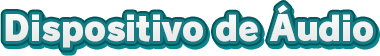
<style>
.page{position:relative;width:380px;height:56px;background:#ffffff}
.page>*{position:absolute;margin:0}
.t1{font:34px "RodinPro-UB";letter-spacing:-0.004em;color:#efeff0;scale:0.97 1}
</style>
<div class="page">
<p class="t1" style="left:5px;top:4px;width:368px;height:44px">Dispositivo de Áudio</p>
</div>
